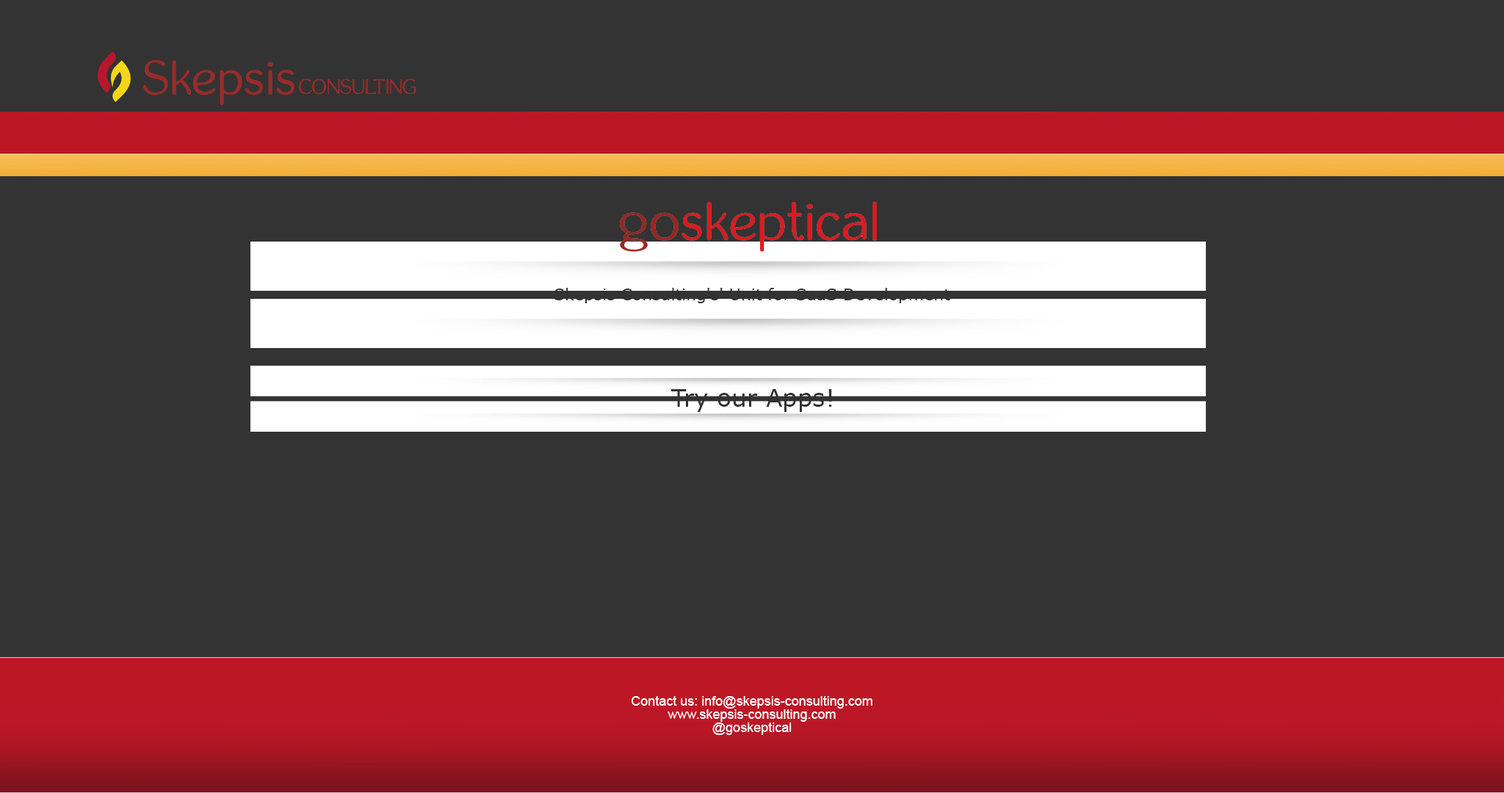
<style>
.page{position:relative;width:1504px;height:793px;background:#333333}
.page>*{position:absolute;margin:0}
.t1{font:49px "inglobal";color:#982c2a}
.t2{font:21.3px "inglobal";color:#982c2a}
.t3{font:16.2px "Verdana";color:#313131}
.t4{font:24.2px "Verdana";color:#313131}
.t5{font:13.2px/13.2px "ArialMT";color:#ffffff}
</style>
<div class="page">
<p class="t1" style="left:143px;top:59px;width:151px;height:46px">Skepsis</p>
<p class="t2" style="left:299px;top:79px;width:117px;height:16px">CONSULTING</p>
<p class="t3" style="left:554px;top:288px;width:396px;height:15px">Skepsis Consulting's' Unit for SaaS Development</p>
<p class="t4" style="left:671px;top:389px;width:161px;height:23px">Try our Apps!</p>
<p class="t5" style="left:631px;top:696px;width:241px;height:39px;text-align:center">Contact us: info@skepsis-consulting.com<br>www.skepsis-consulting.com<br>@goskeptical</p>
</div>
